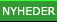
<style>
.page{position:relative;width:57px;height:22px;background:#339933}
.page>*{position:absolute;margin:0}
.t1{font:11px "Verdana";color:#ffffff}
</style>
<div class="page">
<p class="t1" style="left:3px;top:7px;width:53px;height:8px">NYHEDER</p>
</div>
